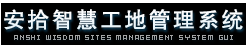
<style>
.page{position:relative;width:250px;height:46px;background:#000000}
.page>*{position:absolute;margin:0}
.t1{font:22px "FZHTJW--GB1-0";letter-spacing:0.103em;color:#f3fafd}
.t2{font:8px "SG08";letter-spacing:0.1em;color:#9da0a2}
</style>
<div class="page">
<p class="t1" style="left:4px;top:9px;width:239px;height:21px">安拾智慧工地管理系统</p>
<p class="t2" style="left:14px;top:35px;width:219px;height:5px">ANSHI WISDOM SITES MANAGEMENT SYSTEM GUI</p>
</div>
